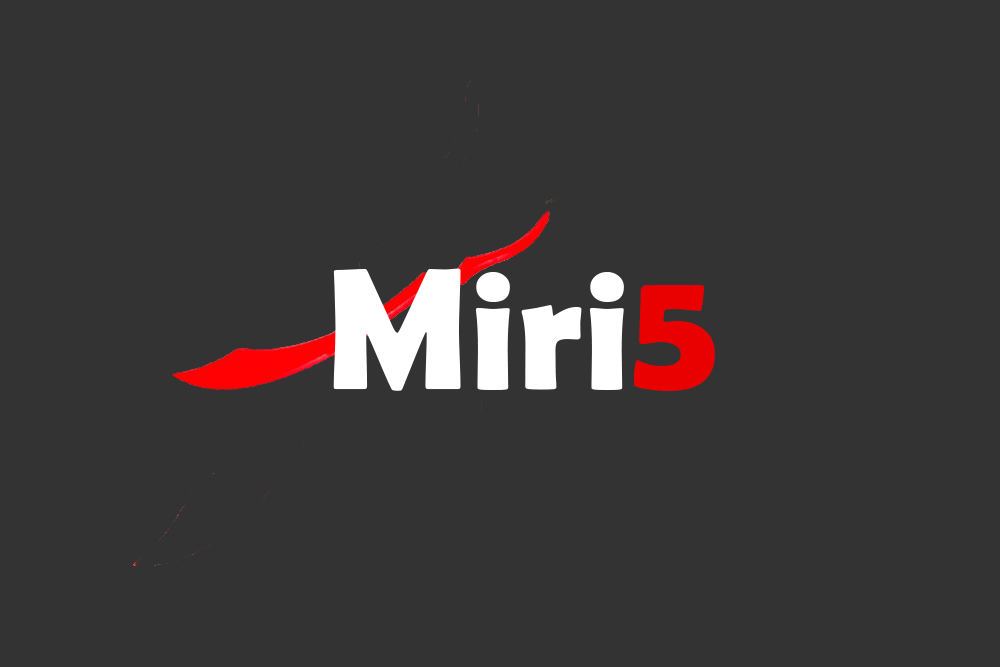
<style>
.page{position:relative;width:1000px;height:667px;background:#333333}
.page>*{position:absolute;margin:0}
.t1{font:174.4px "BerlinSansFBDemi-Bold";color:#ffffff}
.t2{font:174.4px "BerlinSansFBDemi-Bold";color:#e90101}
</style>
<div class="page">
<p class="t1" style="left:333px;top:268px;width:382px;height:123px">Miri<span class="t2">5</span></p>
</div>
